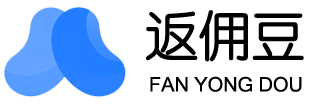
<style>
.page{position:relative;width:311px;height:104px;background:#ffffff}
.page>*{position:absolute;margin:0}
.t1{font:53.3px "STYuanti-SC-Regular";color:#000000}
.t2{font:20px "MicrosoftSansSerif";color:#000000}
</style>
<div class="page">
<p class="t1" style="left:146px;top:10px;width:158px;height:52px">返佣豆</p>
<p class="t2" style="left:150px;top:76px;width:152px;height:16px">FAN YONG DOU</p>
</div>
